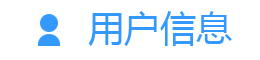
<style>
.page{position:relative;width:260px;height:60px;background:#ffffff}
.page>*{position:absolute;margin:0}
.t1{font:36px "MicrosoftYaHei";color:#3399ff}
</style>
<div class="page">
<p class="t1" style="left:88px;top:11px;width:144px;height:35px">用户信息</p>
</div>
